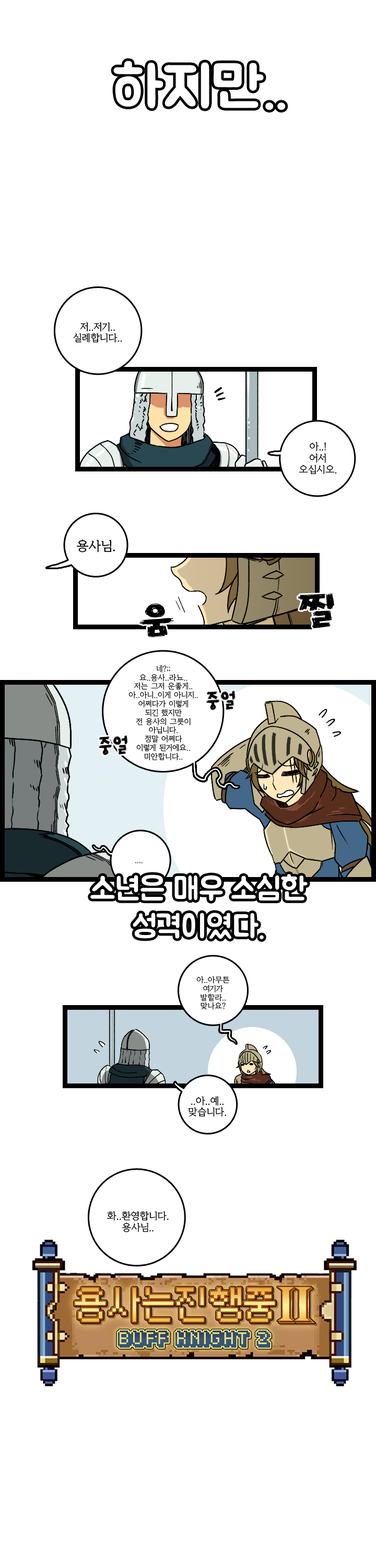
<style>
.page{position:relative;width:376px;height:1568px;background:#ffffff}
.page>*{position:absolute;margin:0}
.t1{font:56.5px "BMJUA";color:#ffffff;scale:1.08 1}
.t2{font:9.4px "KoreanYMJ-B";color:#000000}
.t3{font:12.5px "KoreanYMJ-B";color:#000000}
.t4{font:7.3px "KoreanYMJ-B";color:#000000}
.t5{font:31.4px "BMJUA";color:#ffffff}
</style>
<div class="page">
<p class="t1" style="left:113px;top:61px;width:173px;height:49px">하지만..</p>
<p class="t2" style="left:73px;top:322px;width:49px;height:21px;text-align:center">저..저기..<br>실례합니다..</p>
<p class="t2" style="left:299px;top:442px;width:38px;height:33px;text-align:center">아..!<br>어서<br>오십시오.</p>
<p class="t3" style="left:76px;top:539px;width:39px;height:13px">용사님.</p>
<p class="t4" style="left:129px;top:665px;width:69px;height:95px;text-align:center">네?;;<br>요..용사..라뇨..<br>저는 그저 운좋게..<br>아..아니..이게 아니지..<br>어쩌다가 이렇게<br>되긴 했지만<br>전 용사의 그릇이<br>아닙니다.<br>정말 어쩌다<br>이렇게 된거에요..<br>미안합니다..</p>
<p class="t4" style="left:135px;top:862px;width:8px;height:1px">....</p>
<p class="t5" style="left:90px;top:874px;width:218px;height:65px;text-align:center">소년은 매우 소심한<br>성격이였다.</p>
<p class="t4" style="left:197px;top:976px;width:33px;height:34px;text-align:center">아..아무튼<br>여기가<br>발할라..<br>맞나요?</p>
<p class="t2" style="left:188px;top:1096px;width:38px;height:21px;text-align:center">..아..예..<br>맞습니다.</p>
<p class="t2" style="left:107px;top:1211px;width:62px;height:21px;text-align:center">화..환영합니다.<br>용사님..</p>
</div>
